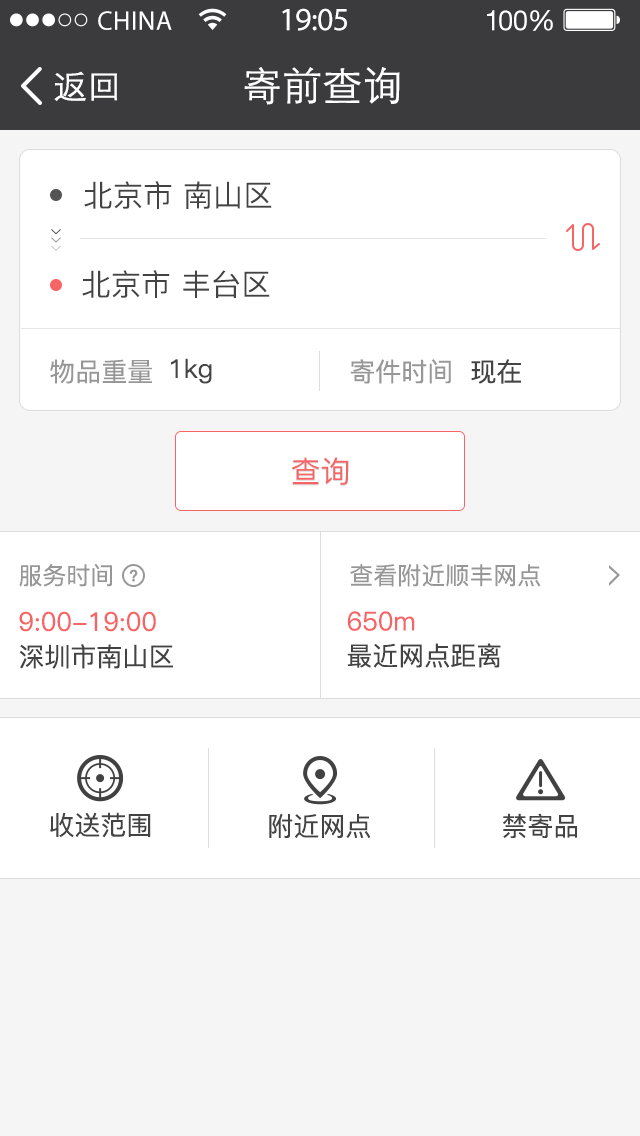
<style>
.page{position:relative;width:640px;height:1136px;background:#ffffff}
.page>*{position:absolute;margin:0}
.t1{font:26.9px "MyriadPro-Regular";letter-spacing:0.02em;color:#ffffff}
.t2{font:32.7px "MyriadPro-Regular";letter-spacing:-0.02em;color:#ffffff}
.t3{font:28.1px "HelveticaNeueLTStd-Roman";letter-spacing:-0.02em;color:#ffffff}
.t4{font:34px "STHeitiSC-Light";color:#ffffff}
.t5{font:40px "STHeitiSC-Light";color:#ffffff}
.t6{font:30px "PingFang-SC-Medium";color:#434343}
.t7{font:26px "PingFang-SC-Medium";color:#979797}
.t8{font:26px "PingFang-SC-Medium";color:#434343}
.t9{font:30px "PingFang-SC-Medium";color:#f66465}
.t10{font:24px "PingFang-SC-Medium";color:#979797}
.t11{font:16px "PingFang-SC-Heavy";color:#979797}
.t12{font:26px "PingFang-SC-Medium";color:#f66465}
.t13{font:26.2px "PingFang-SC-Medium";color:#434343}
</style>
<div class="page">
<p class="t1" style="left:98px;top:11px;width:74px;height:19px">CHINA</p>
<p class="t2" style="left:282px;top:8px;width:65px;height:23px">19:05</p>
<p class="t3" style="left:487px;top:10px;width:66px;height:21px">100%</p>
<p class="t4" style="left:54px;top:71px;width:63px;height:30px">返回</p>
<p class="t5" style="left:244px;top:67px;width:156px;height:38px">寄前查询</p>
<p class="t6" style="left:84px;top:181px;width:188px;height:28px">北京市 南山区</p>
<p class="t6" style="left:82px;top:270px;width:188px;height:28px">北京市 丰台区</p>
<p class="t7" style="left:50px;top:359px;width:102px;height:25px">物品重量</p>
<p class="t8" style="left:171px;top:358px;width:41px;height:26px">1kg</p>
<p class="t7" style="left:350px;top:359px;width:101px;height:25px">寄件时间</p>
<p class="t8" style="left:471px;top:359px;width:50px;height:25px">现在</p>
<p class="t9" style="left:292px;top:457px;width:57px;height:28px">查询</p>
<p class="t10" style="left:19px;top:564px;width:93px;height:23px">服务时间</p>
<p class="t11" style="left:129px;top:569px;width:9px;height:13px">？</p>
<p class="t10" style="left:350px;top:564px;width:191px;height:23px">查看附近顺丰网点</p>
<p class="t12" style="left:19px;top:611px;width:137px;height:21px">9:00-19:00</p>
<p class="t12" style="left:347px;top:611px;width:68px;height:20px">650m</p>
<p class="t8" style="left:19px;top:644px;width:154px;height:25px">深圳市南山区</p>
<p class="t8" style="left:347px;top:643px;width:154px;height:25px">最近网点距离</p>
<p class="t13" style="left:50px;top:812px;width:101px;height:26px">收送范围</p>
<p class="t13" style="left:269px;top:813px;width:102px;height:25px">附近网点</p>
<p class="t13" style="left:503px;top:813px;width:74px;height:25px">禁寄品</p>
</div>
